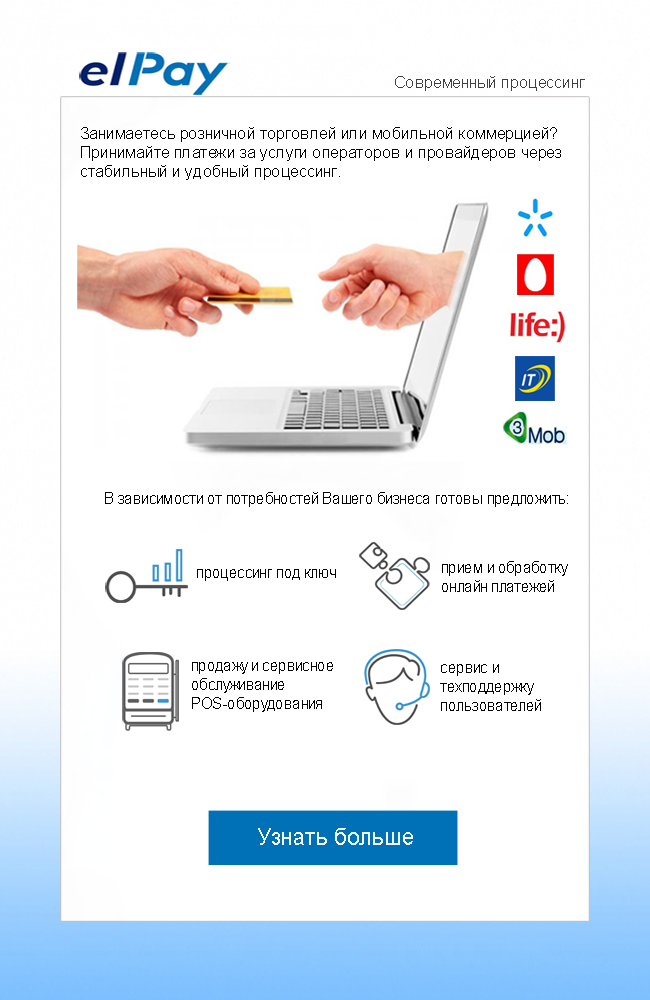
<style>
.page{position:relative;width:650px;height:1000px;background:#ffffff}
.page>*{position:absolute;margin:0}
.t1{font:16px "ArialMT";color:#413f3f}
.t2{font:16px "ArialMT";color:#030303}
.t3{font:16px "ArialMT";color:#030303;scale:0.93 1}
.t4{font:24px "ArialMT";color:#f4f8fb;scale:0.93 1}
</style>
<div class="page">
<p class="t1" style="left:395px;top:76px;width:190px;height:15px">Современный процессинг</p>
<p class="t2" style="left:81px;top:127px;width:480px;height:53px">Занимаетесь розничной торговлей или мобильной коммерцией? <br>Принимайте платежи за услуги операторов и провайдеров через <br>стабильный и удобный процессинг.</p>
<p class="t3" style="left:105px;top:492px;width:463px;height:15px">В зависимости от потребностей Вашего бизнеса готовы предложить:</p>
<p class="t3" style="left:197px;top:569px;width:139px;height:12px">процессинг под ключ</p>
<p class="t3" style="left:442px;top:561px;width:126px;height:31px">прием и обработку<br>онлайн платежей</p>
<p class="t3" style="left:192px;top:662px;width:141px;height:50px">продажу и сервисное<br>обслуживание<br>POS-оборудования</p>
<p class="t3" style="left:440px;top:664px;width:101px;height:47px">сервис и <br>техподдержку<br>пользователей</p>
<p class="t4" style="left:258px;top:828px;width:155px;height:17px">Узнать больше</p>
</div>
